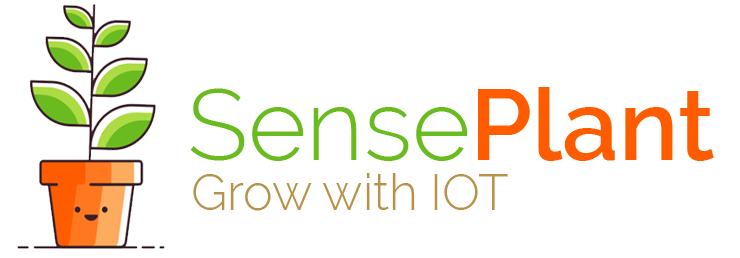
<style>
.page{position:relative;width:740px;height:258px;background:#ffffff}
.page>*{position:absolute;margin:0}
.t1{font:100px "Raleway-Light";color:#6abb20}
.t2{font:100px "Raleway-SemiBold";color:#ff5c00}
.t3{font:50px "Raleway-Light";color:#b79248}
</style>
<div class="page">
<p class="t1" style="left:190px;top:87px;width:524px;height:74px">Sense<span class="t2">Plant</span></p>
<p class="t3" style="left:193px;top:173px;width:315px;height:38px">Grow with IOT</p>
</div>
